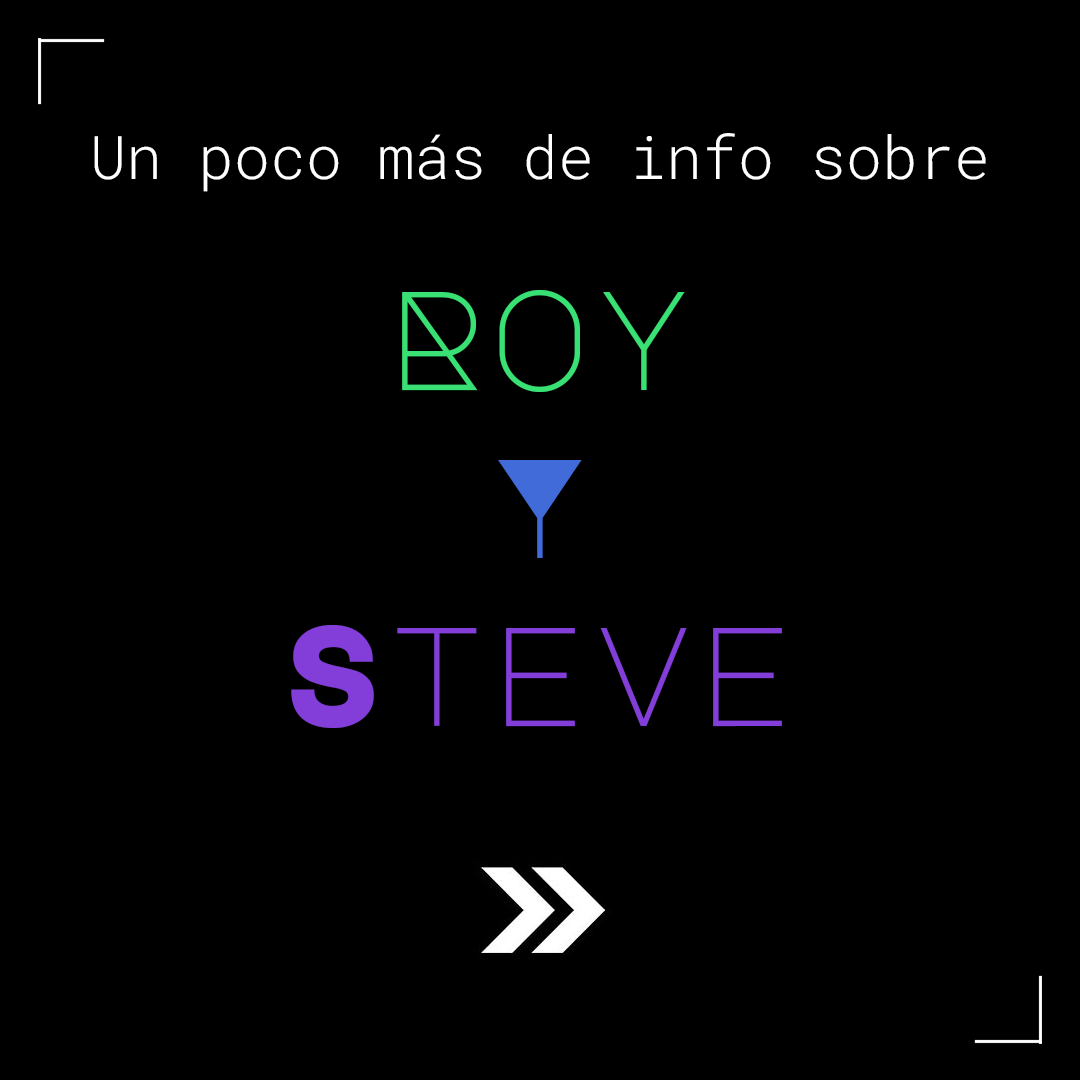
<style>
.page{position:relative;width:1080px;height:1080px;background:#000000}
.page>*{position:absolute;margin:0}
.t1{font:60px "RobotoMono-Light";color:#ffffff}
.t2{font:140px "MajorMonoDisplay-Regular";color:#833ed9}
.t3{font:140px "MajorMonoDisplay-Regular";color:#39e174}
.t4{font:140px "MajorMonoDisplay-Regular";color:#416bd9}
</style>
<div class="page">
<p class="t1" style="left:94px;top:133px;width:892px;height:59px">Un poco más de info sobre</p>
<p class="t2" style="left:291px;top:290px;width:491px;height:438px;text-align:center"><span class="t3">Roy <br></span><span class="t4">Y </span>Steve</p>
</div>
